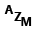
<style>
.page{position:relative;width:32px;height:32px;background:#ffffff}
.page>*{position:absolute;margin:0}
.t1{font:12px "Gadugi-Bold";color:#000000}
</style>
<div class="page">
<p class="t1" style="left:4px;top:5px;width:10px;height:9px">A</p>
<p class="t1" style="left:14px;top:12px;width:8px;height:9px">Z</p>
<p class="t1" style="left:21px;top:17px;width:11px;height:9px">M</p>
</div>
